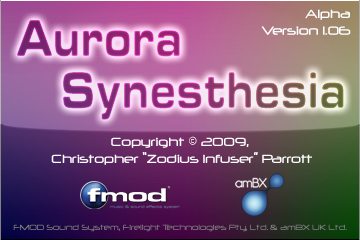
<style>
.page{position:relative;width:360px;height:240px}
.page>*{position:absolute;margin:0}
.t1{font:14px "Neuropol";color:#ffffff}
.t2{font:54px "EurostarBlackExtended";scale:0.67 1}
.t3{font:9px "Neuropol";color:#808080}
</style>
<div class="page">
<p class="t1" style="left:261px;top:9px;width:90px;height:26px;text-align:right">Alpha<br>Version 1.06</p>
<p class="t2" style="left:16px;top:20px;width:164px;height:37px">Aurora</p>
<p class="t2" style="left:63px;top:72px;width:281px;height:48px">Synesthesia</p>
<p class="t1" style="left:51px;top:136px;width:261px;height:29px;text-align:center">Copyright © 2009,<br> Christopher “Zodius Infuser” Parrott</p>
<p class="t3" style="left:13px;top:224px;width:334px;height:8px">FMOD Sound System, Firelight Technologies Pty, Ltd. &amp; amBX UK Ltd.</p>
</div>
